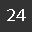
<style>
.page{position:relative;width:32px;height:32px;background:#333333}
.page>*{position:absolute;margin:0}
.t1{font:17.8px "MyriadPro-Regular";color:#ffffff;scale:1.12 1}
</style>
<div class="page">
<p class="t1" style="left:7px;top:9px;width:19px;height:12px">24</p>
</div>
